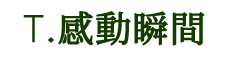
<style>
.page{position:relative;width:227px;height:57px;background:#ffffff}
.page>*{position:absolute;margin:0}
.t1{font:36px "SourceHanSerifTW-Regular";letter-spacing:0.01em;color:#153b01;font-weight:bold}
.t2{font:36px "AMGDT_IV50";letter-spacing:0.01em;color:#153b01}
</style>
<div class="page">
<p class="t1" style="left:23px;top:11px;width:182px;height:35px"><span class="t2">T.</span>感動瞬間</p>
</div>
